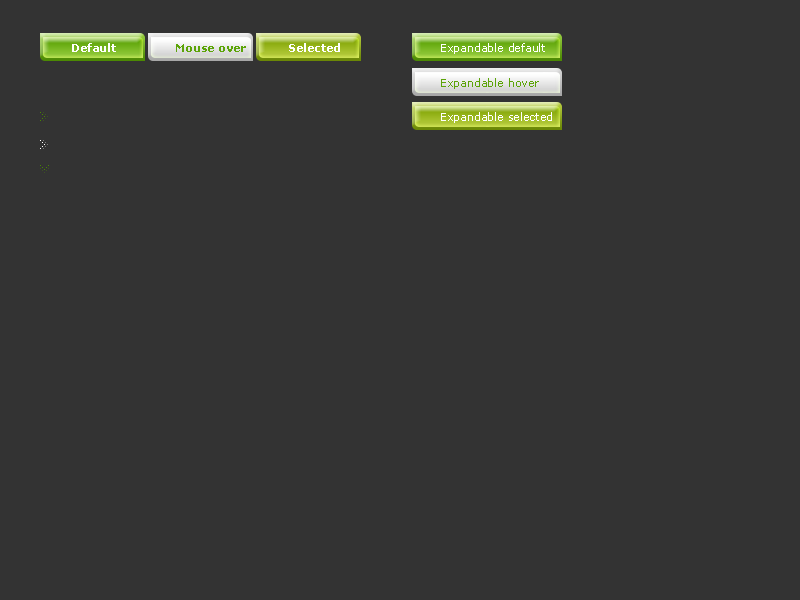
<style>
.page{position:relative;width:800px;height:600px;background:#333333}
.page>*{position:absolute;margin:0}
.t1{font:11px "Verdana-Bold";color:#ffffff}
.t2{font:11px "Verdana-Bold";color:#5ca408}
.t3{font:11px "Verdana";color:#ffffff}
.t4{font:11px "Verdana";color:#5ca408}
</style>
<div class="page">
<p class="t1" style="left:72px;top:43px;width:44px;height:9px">Default</p>
<p class="t2" style="left:176px;top:44px;width:70px;height:8px">Mouse over</p>
<p class="t1" style="left:289px;top:43px;width:51px;height:9px">Selected</p>
<p class="t3" style="left:441px;top:43px;width:104px;height:11px">Expandable default</p>
<p class="t4" style="left:441px;top:78px;width:98px;height:11px">Expandable hover</p>
<p class="t3" style="left:441px;top:112px;width:111px;height:11px">Expandable selected</p>
</div>
